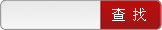
<style>
.page{position:relative;width:162px;height:30px}
.page>*{position:absolute;margin:0}
.t1{font:14px "NSimSun";color:#ffffff}
</style>
<div class="page">
<p class="t1" style="left:112px;top:8px;width:34px;height:13px">查 找</p>
</div>
